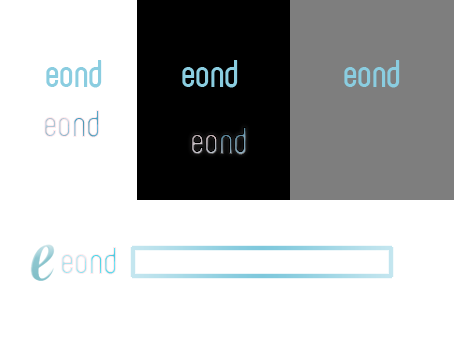
<style>
.page{position:relative;width:454px;height:340px;background:#ffffff}
.page>*{position:absolute;margin:0}
.t1{font:36px "071MKSD-01Medium";color:#8acde0}
.t2{font:36px "071MKSD-01Medium"}
</style>
<div class="page">
<p class="t1" style="left:46px;top:60px;width:56px;height:28px">eond</p>
<p class="t1" style="left:182px;top:60px;width:56px;height:28px">eond</p>
<p class="t1" style="left:344px;top:60px;width:56px;height:28px">eond</p>
<p class="t2" style="left:44px;top:110px;width:56px;height:28px">eond</p>
<p class="t2" style="left:191px;top:127px;width:56px;height:28px">eond</p>
<p class="t2" style="left:191px;top:127px;width:56px;height:28px">eond</p>
<p class="t2" style="left:61px;top:247px;width:56px;height:28px">eond</p>
</div>
